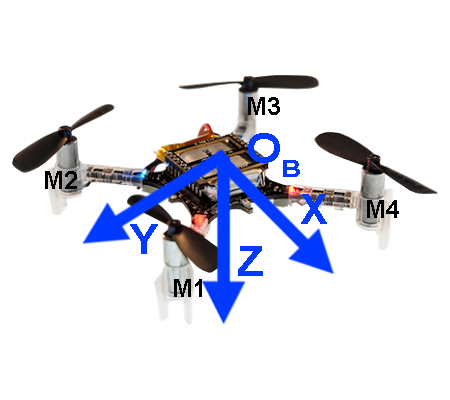
<style>
.page{position:relative;width:450px;height:400px;background:#ffffff}
.page>*{position:absolute;margin:0}
.t1{font:25px "Arial-BoldMT";color:#000000}
.t2{font:42px "Arial-BoldMT";color:#0239ff;scale:1.1 1}
.t3{font:42px "Arial-BoldMT";color:#0239ff}
</style>
<div class="page">
<p class="t1" style="left:248px;top:97px;width:32px;height:18px">M3</p>
<p class="t2" style="left:248px;top:133px;width:52px;height:44px">OB</p>
<p class="t1" style="left:45px;top:171px;width:32px;height:18px">M2</p>
<p class="t3" style="left:301px;top:194px;width:26px;height:30px">X</p>
<p class="t1" style="left:367px;top:200px;width:32px;height:18px">M4</p>
<p class="t3" style="left:130px;top:224px;width:28px;height:30px">Y</p>
<p class="t3" style="left:238px;top:246px;width:25px;height:30px">Z</p>
<p class="t1" style="left:174px;top:279px;width:28px;height:18px">M1</p>
</div>
